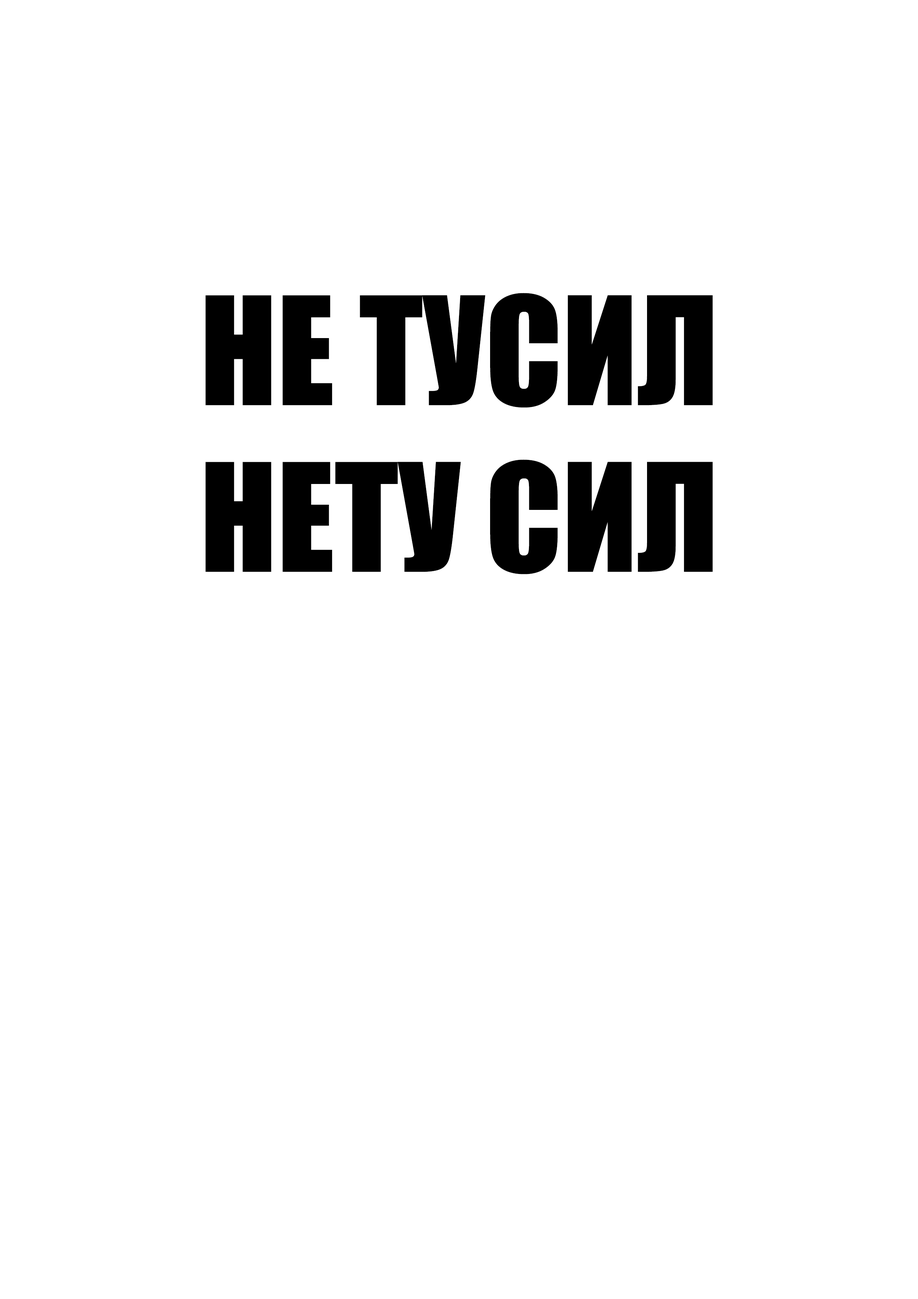
<style>
.page{position:relative;width:918px;height:1299px;background:#ffffff}
.page>*{position:absolute;margin:0}
.t1{font:138.8px "Impact";color:#000000}
</style>
<div class="page">
<p class="t1" style="left:205px;top:293px;width:508px;height:281px;text-align:center">НЕ ТУСИЛ<br>НЕТУ СИЛ</p>
</div>
